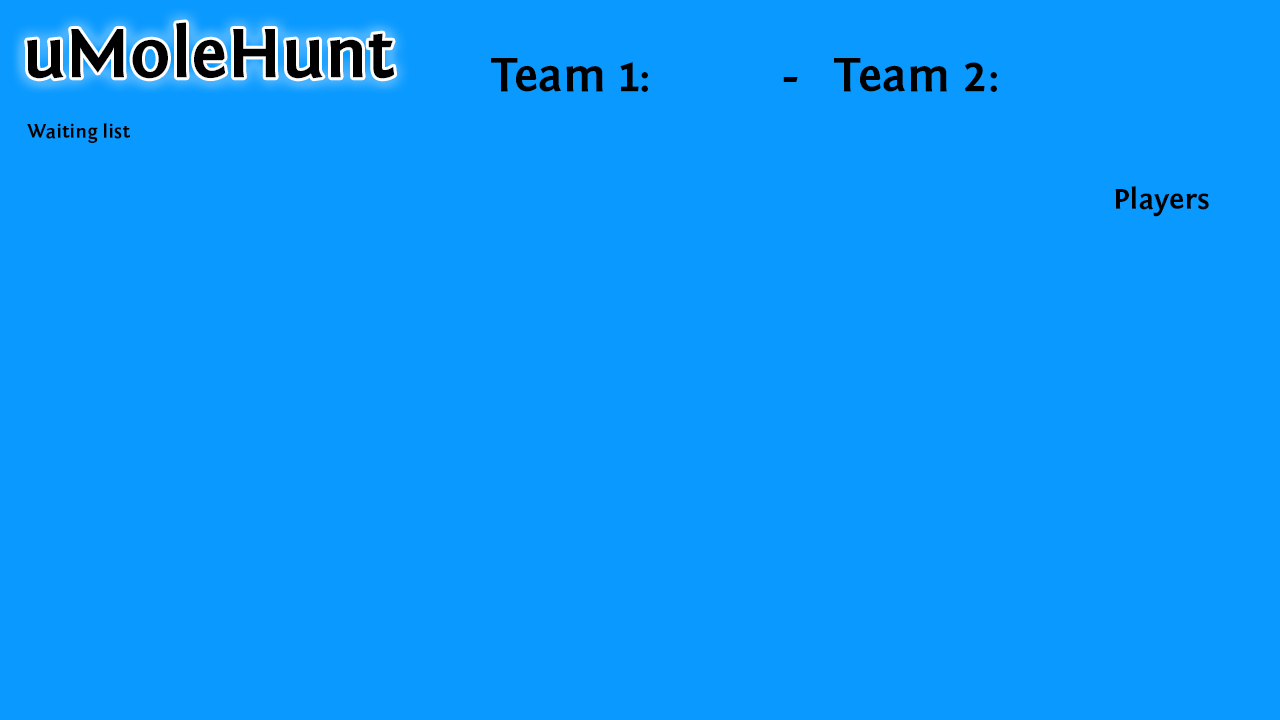
<style>
.page{position:relative;width:1280px;height:720px;background:#0999ff}
.page>*{position:absolute;margin:0}
.t1{font:72px "FontinSans-Bold";color:#000000}
.t2{font:48px "FontinSans-Bold";color:#000000}
.t3{font:20px "FontinSans-Bold";color:#000000}
.t4{font:30px "FontinSans-Bold";color:#000000}
</style>
<div class="page">
<p class="t1" style="left:27px;top:22px;width:368px;height:57px">uMoleHunt</p>
<p class="t2" style="left:491px;top:58px;width:506px;height:34px">Team 1:           -   Team 2:</p>
<p class="t3" style="left:27px;top:123px;width:103px;height:20px">Waiting list</p>
<p class="t4" style="left:1115px;top:186px;width:94px;height:31px">Players</p>
</div>
